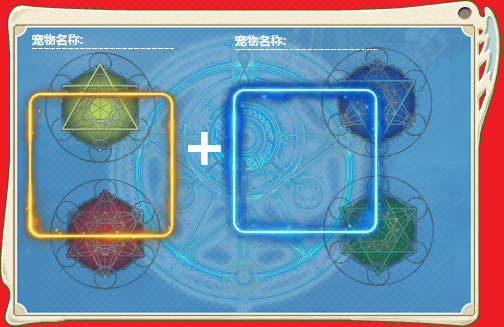
<style>
.page{position:relative;width:504px;height:327px}
.page>*{position:absolute;margin:0}
.t1{font:12px "MicrosoftYaHei-Bold";color:#ffffff}
.t2{font:64px "MicrosoftYaHei-Bold";color:#ffffff}
</style>
<div class="page">
<p class="t1" style="left:31px;top:33px;width:52px;height:13px">宠物名称:</p>
<p class="t1" style="left:234px;top:34px;width:52px;height:13px">宠物名称:</p>
<p class="t2" style="left:188px;top:132px;width:33px;height:33px">+</p>
</div>
